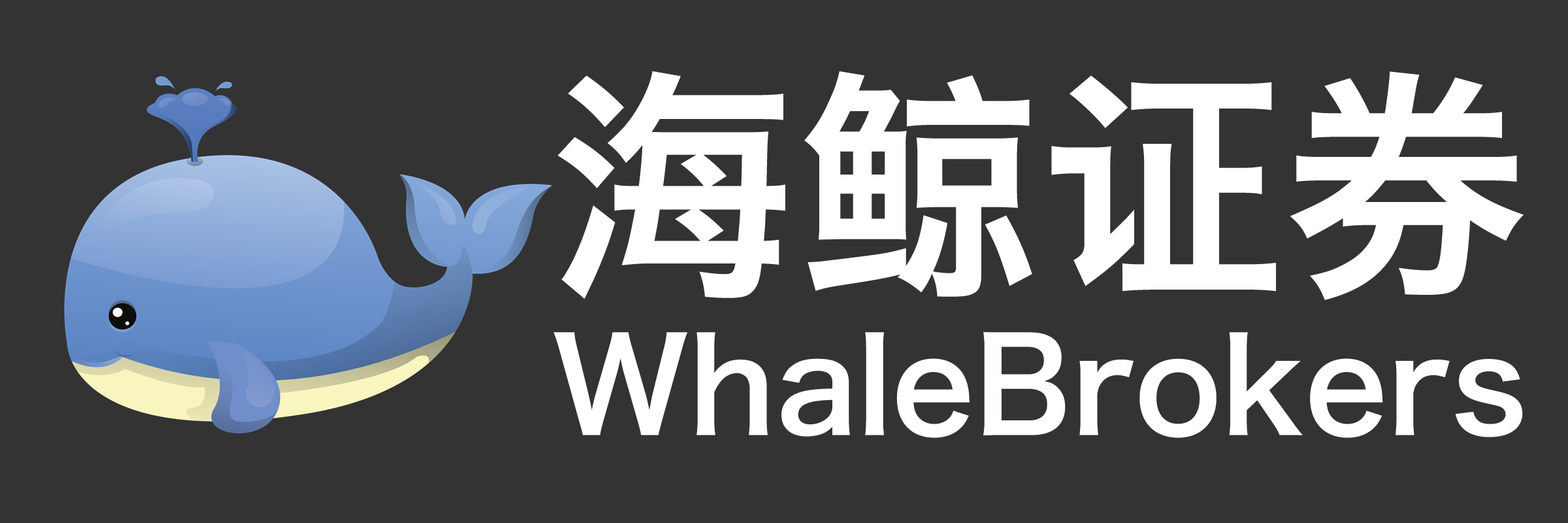
<style>
.page{position:relative;width:1568px;height:523px;background:#333333}
.page>*{position:absolute;margin:0}
.t1{font:128.9px "HiraginoSansGB-W6";color:#ffffff}
.t2{font:243.9px "HiraginoSansGB-W6";color:#ffffff}
</style>
<div class="page">
<p class="t1" style="left:553px;top:71px;width:971px;height:367px"><span class="t2">海鲸证券<br></span>WhaleBrokers</p>
</div>
